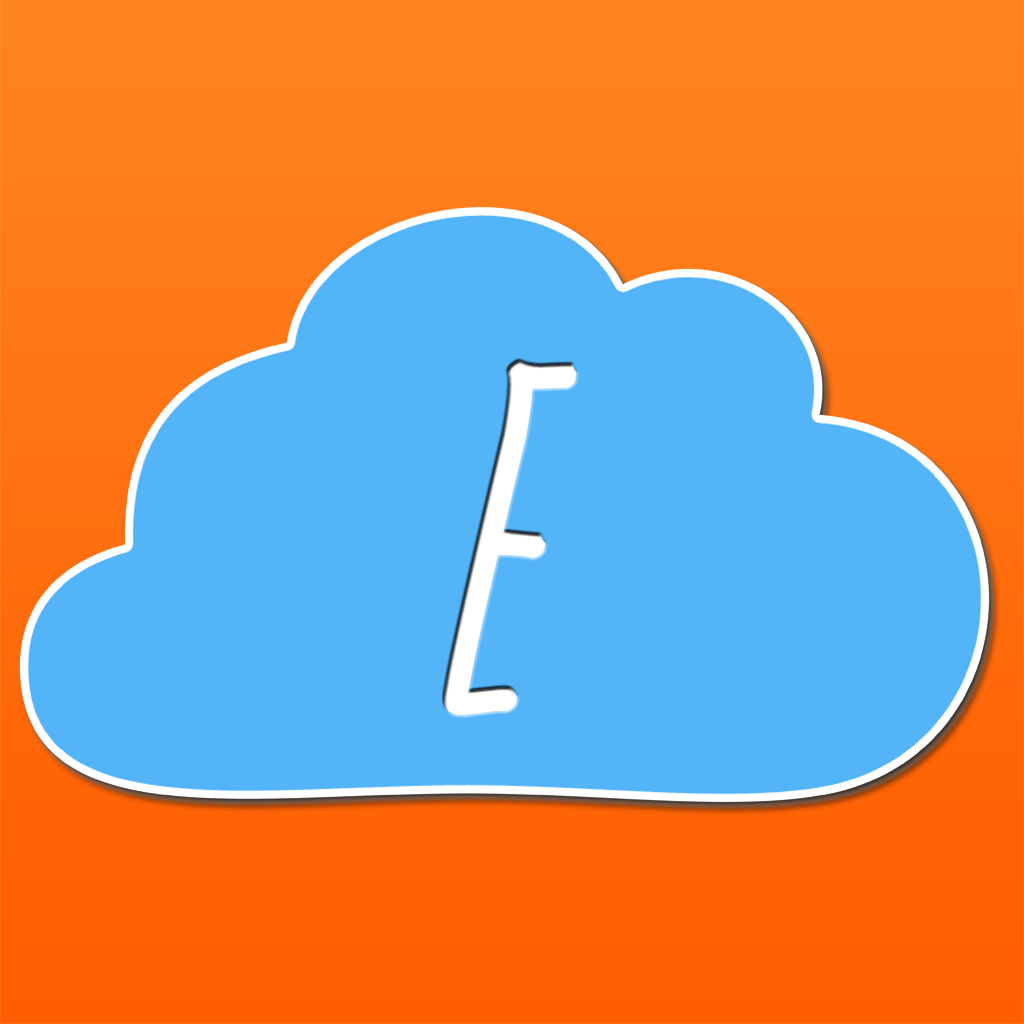
<style>
.page{position:relative;width:1024px;height:1024px;background:#53b4f8}
.page>*{position:absolute;margin:0}
.t1{font:500px "BrainFlower";color:#ffffff;font-weight:bold;font-style:italic}
</style>
<div class="page">
<p class="t1" style="left:444px;top:360px;width:133px;height:355px">E</p>
</div>
